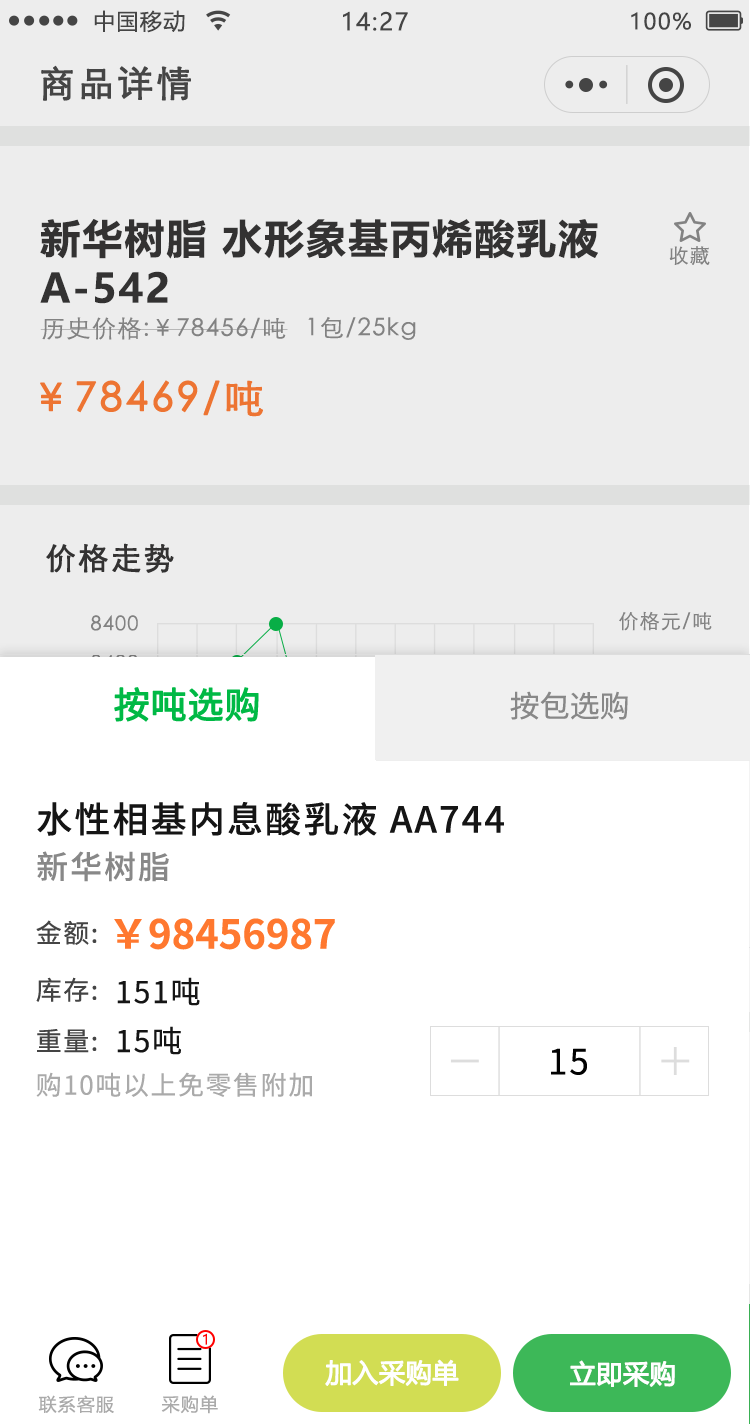
<style>
.page{position:relative;width:750px;height:1424px;background:#ffffff}
.page>*{position:absolute;margin:0}
.t1{font:22px "MicrosoftYaHei";letter-spacing:0.06em;color:#444444}
.t2{font:24px "MicrosoftYaHei";letter-spacing:0.06em;color:#444444}
.t3{font:36px "STXihei";letter-spacing:0.06em;color:#444444;font-weight:bold}
.t4{font:40px/50px "MicrosoftYaHei-Bold";letter-spacing:0.05em;color:#302f2f}
.t5{font:20px "STXihei";letter-spacing:0.06em;color:#888888}
.t6{font:24px "STXihei";letter-spacing:0.06em;color:#888888}
.t7{font:40px "STXihei";letter-spacing:0.06em;color:#ff782f;font-weight:bold}
.t8{font:30px "STXihei";letter-spacing:0.06em;color:#302f2f;font-weight:bold}
.t9{font:36px "NotoSansCJKsc-Regular";color:#00b945;font-weight:bold}
.t10{font:30px "NotoSansCJKsc-Regular";color:#888888}
.t11{font:36px "NotoSansCJKsc-Medium";letter-spacing:0.06em;color:#151515}
.t12{font:32px "NotoSansCJKsc-Medium";letter-spacing:0.06em;color:#888888}
.t13{font:40px "NotoSansCJKsc-Bold";color:#ff782f}
.t14{font:26px "NotoSansCJKsc-Regular";letter-spacing:0.06em;color:#444444}
.t15{font:30px "NotoSansCJKsc-Regular";letter-spacing:0.06em;color:#151515}
.t16{font:35px "NotoSansCJKsc-Regular";letter-spacing:0.06em;color:#010101}
.t17{font:26px "NotoSansCJKsc-Regular";letter-spacing:0.06em;color:#aaaaaa}
.t18{font:14px "MicrosoftYaHei";letter-spacing:0.06em;color:#ff0000}
.t19{font:26px "MicrosoftYaHei";color:#ffffff;font-weight:bold}
.t20{font:18px "MicrosoftYaHei";letter-spacing:0.06em;color:#aaaaaa}
</style>
<div class="page">
<p class="t1" style="left:94px;top:10px;width:91px;height:23px">中国移动</p>
<p class="t2" style="left:343px;top:11px;width:65px;height:20px">14:27</p>
<p class="t1" style="left:631px;top:12px;width:60px;height:18px">100%</p>
<p class="t3" style="left:41px;top:65px;width:150px;height:36px">商品详情</p>
<p class="t4" style="left:40px;top:219px;width:558px;height:85px">新华树脂 水形象基丙烯酸乳液<br>A-542</p>
<p class="t5" style="left:669px;top:246px;width:41px;height:19px">收藏</p>
<p class="t6" style="left:40px;top:317px;width:248px;height:23px">历史价格:￥78456/吨</p>
<p class="t6" style="left:308px;top:317px;width:108px;height:23px">1包/25kg</p>
<p class="t7" style="left:40px;top:380px;width:223px;height:37px">￥78469/吨</p>
<p class="t8" style="left:46px;top:543px;width:128px;height:30px">价格走势</p>
<p class="t5" style="left:91px;top:615px;width:47px;height:16px">8400</p>
<p class="t5" style="left:619px;top:611px;width:93px;height:20px">价格元/吨</p>
<p class="t9" style="left:114px;top:687px;width:145px;height:35px">按吨选购</p>
<p class="t10" style="left:510px;top:691px;width:118px;height:29px">按包选购</p>
<p class="t11" style="left:37px;top:802px;width:467px;height:34px">水性相基内息酸乳液 AA744</p>
<p class="t12" style="left:37px;top:851px;width:132px;height:31px">新华树脂</p>
<p class="t13" style="left:114px;top:918px;width:221px;height:32px">￥98456987</p>
<p class="t14" style="left:36px;top:920px;width:61px;height:25px">金额:</p>
<p class="t14" style="left:36px;top:977px;width:61px;height:25px">库存:</p>
<p class="t15" style="left:117px;top:977px;width:83px;height:29px">151吨</p>
<p class="t14" style="left:37px;top:1029px;width:60px;height:24px">重量:</p>
<p class="t15" style="left:117px;top:1026px;width:64px;height:29px">15吨</p>
<p class="t16" style="left:551px;top:1048px;width:36px;height:27px">15</p>
<p class="t17" style="left:36px;top:1072px;width:276px;height:25px">购10吨以上免零售附加</p>
<p class="t18" style="left:203px;top:1333px;width:4px;height:12px">1</p>
<p class="t19" style="left:325px;top:1359px;width:134px;height:27px">加入采购单</p>
<p class="t19" style="left:570px;top:1360px;width:105px;height:27px">立即采购</p>
<p class="t20" style="left:38px;top:1395px;width:76px;height:18px">联系客服</p>
<p class="t20" style="left:161px;top:1395px;width:57px;height:19px">采购单</p>
</div>
